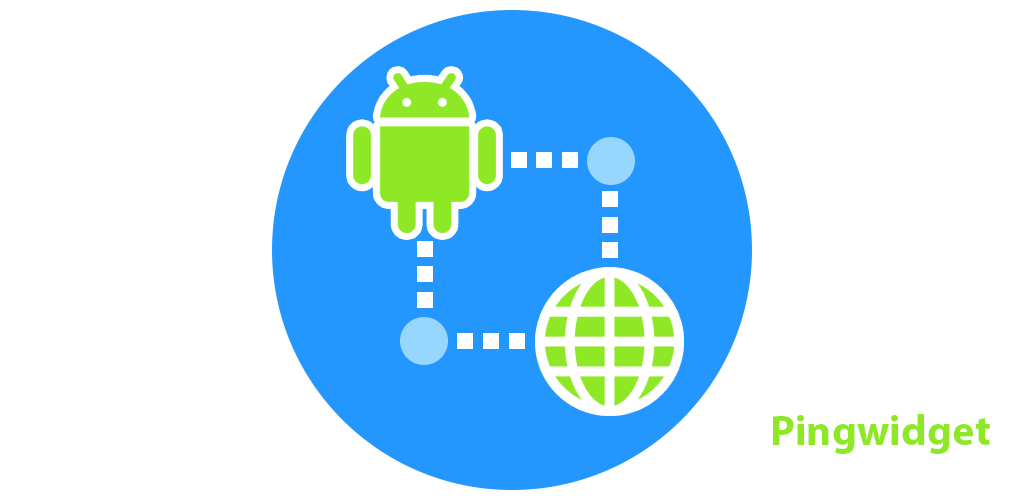
<style>
.page{position:relative;width:1024px;height:500px;background:#ffffff}
.page>*{position:absolute;margin:0}
.t1{font:43px "MyriadPro-Bold";color:#8ee826}
</style>
<div class="page">
<p class="t1" style="left:773px;top:414px;width:217px;height:40px">Pingwidget</p>
</div>
